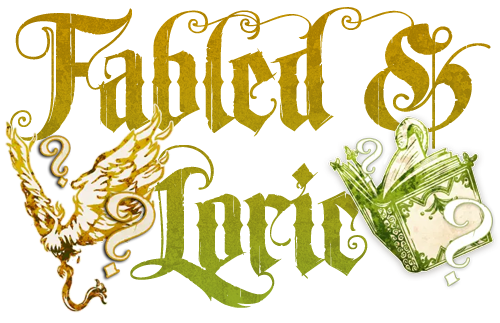
<style>
.page{position:relative;width:500px;height:323px;background:#ffffff}
.page>*{position:absolute;margin:0}
.t1{font:180px/143px "LHFUnlovable2"}
</style>
<div class="page">
<p class="t1" style="left:10px;top:7px;width:481px;height:301px;text-align:center">Fabled &amp;<br>Loric</p>
</div>
